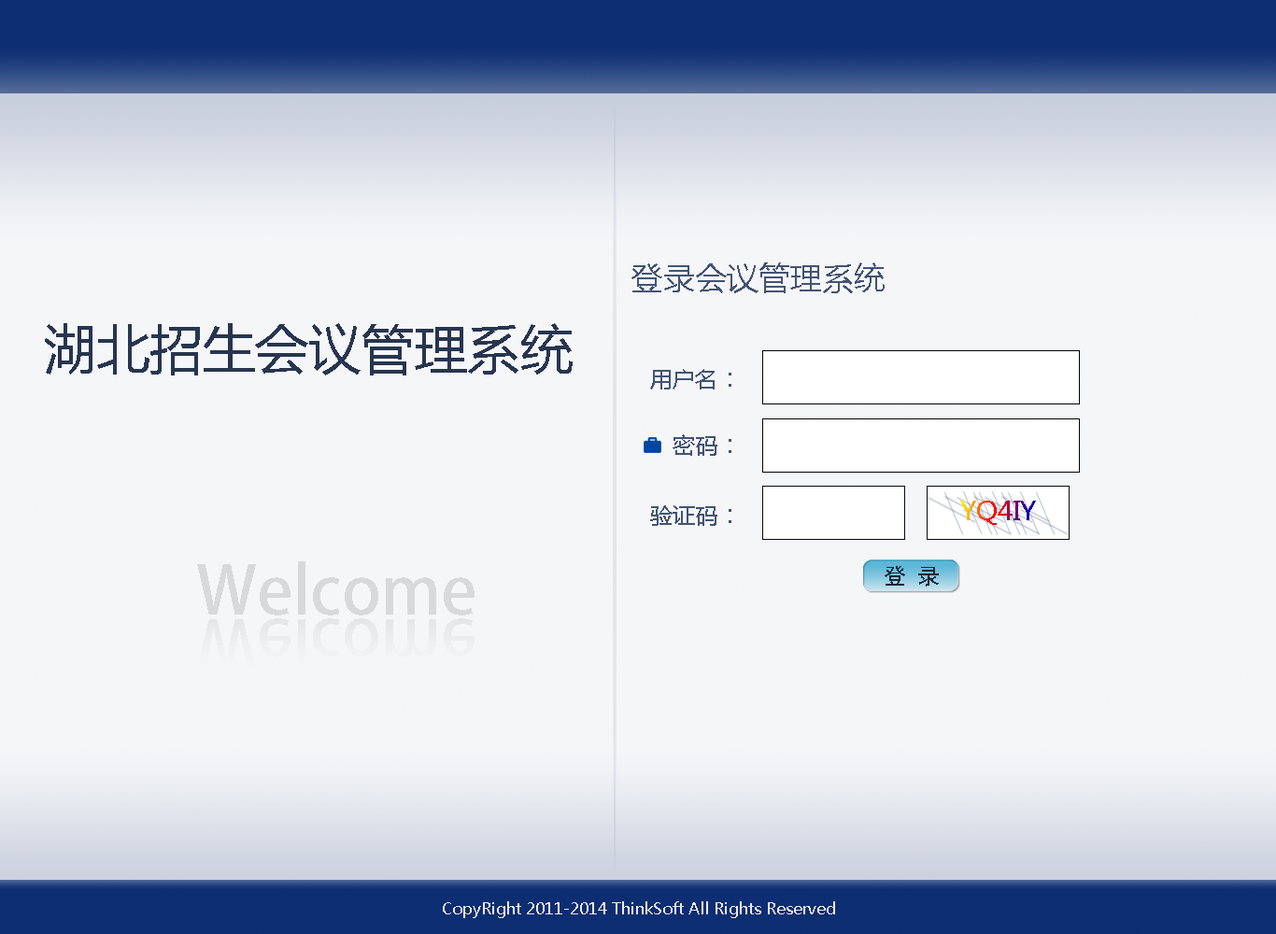
<style>
.page{position:relative;width:1276px;height:934px;background:#f4f6f8}
.page>*{position:absolute;margin:0}
.t1{font:31.8px "MicrosoftYaHei";color:#435372}
.t2{font:53px "MicrosoftYaHei";color:#27354f}
.t3{font:22.4px "MicrosoftYaHei";color:#435372}
.t4{font:26.5px "MicrosoftYaHei";color:#435372}
.t5{font:66.2px "AdobeHeitiStd-Regular";color:#d7d9db}
.t6{font:22.4px "SimHei";color:#1b2639}
.t7{font:65.9px "AdobeHeitiStd-Regular";color:#edeef0}
.t8{font:15.9px "MicrosoftYaHei";color:#efe7e7}
</style>
<div class="page">
<p class="t1" style="left:632px;top:263px;width:253px;height:30px">登录会议管理系统</p>
<p class="t2" style="left:45px;top:323px;width:528px;height:53px">湖北招生会议管理系统</p>
<p class="t3" style="left:650px;top:369px;width:82px;height:21px">用户名<span class="t4">：</span></p>
<p class="t3" style="left:673px;top:434px;width:59px;height:22px">密码<span class="t4">：</span></p>
<p class="t3" style="left:650px;top:505px;width:82px;height:21px">验证码<span class="t4">：</span></p>
<p class="t5" style="left:197px;top:562px;width:278px;height:54px">Welcome</p>
<p class="t6" style="left:885px;top:566px;width:54px;height:21px">登 录</p>
<p class="t7" style="left:197px;top:619px;width:278px;height:54px">Welcome</p>
<p class="t8" style="left:443px;top:902px;width:392px;height:16px">CopyRight 2011-2014 ThinkSoft All Rights Reserved</p>
</div>
